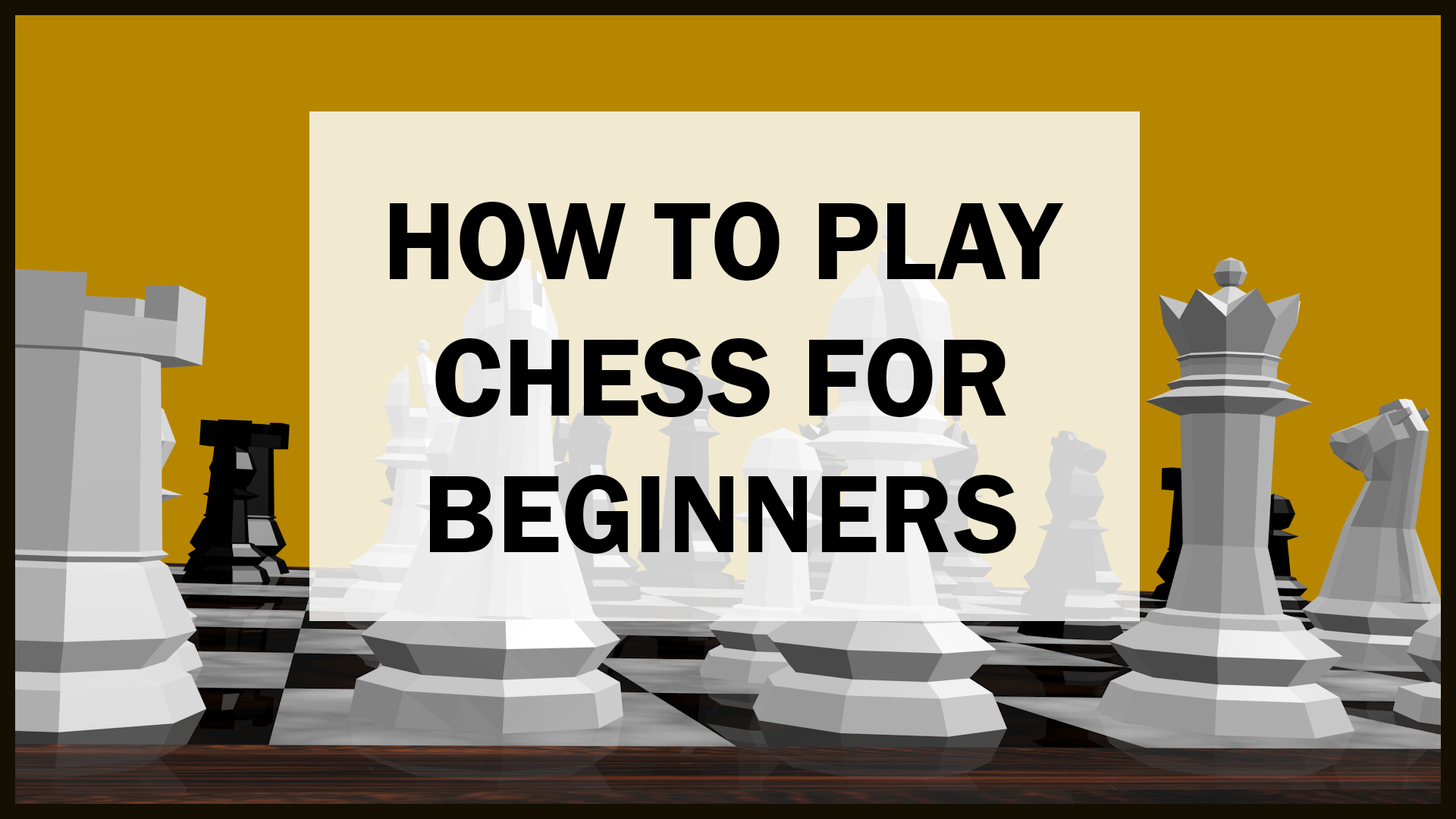
<style>
.page{position:relative;width:1456px;height:819px;background:#b78600}
.page>*{position:absolute;margin:0}
.t1{font:113.7px "FranklinGothic-Demi";color:#000000}
</style>
<div class="page">
<p class="t1" style="left:390px;top:202px;width:674px;height:352px;text-align:center">HOW TO PLAY<br>CHESS FOR<br>BEGINNERS</p>
</div>
